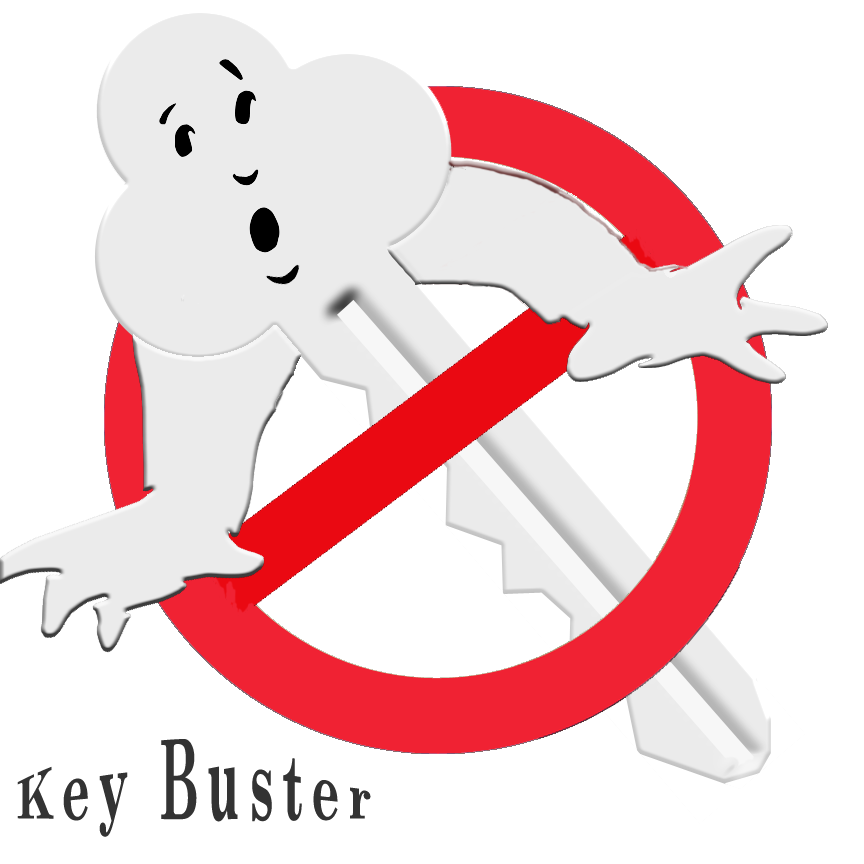
<style>
.page{position:relative;width:864px;height:864px;background:#ffffff}
.page>*{position:absolute;margin:0}
.t1{font:48px "CenturySchoolbook-Bold";letter-spacing:0.18em;color:#333333}
</style>
<div class="page">
<p class="t1" style="left:17px;top:739px;width:354px;height:98px;text-align:center">Key Buster</p>
</div>
